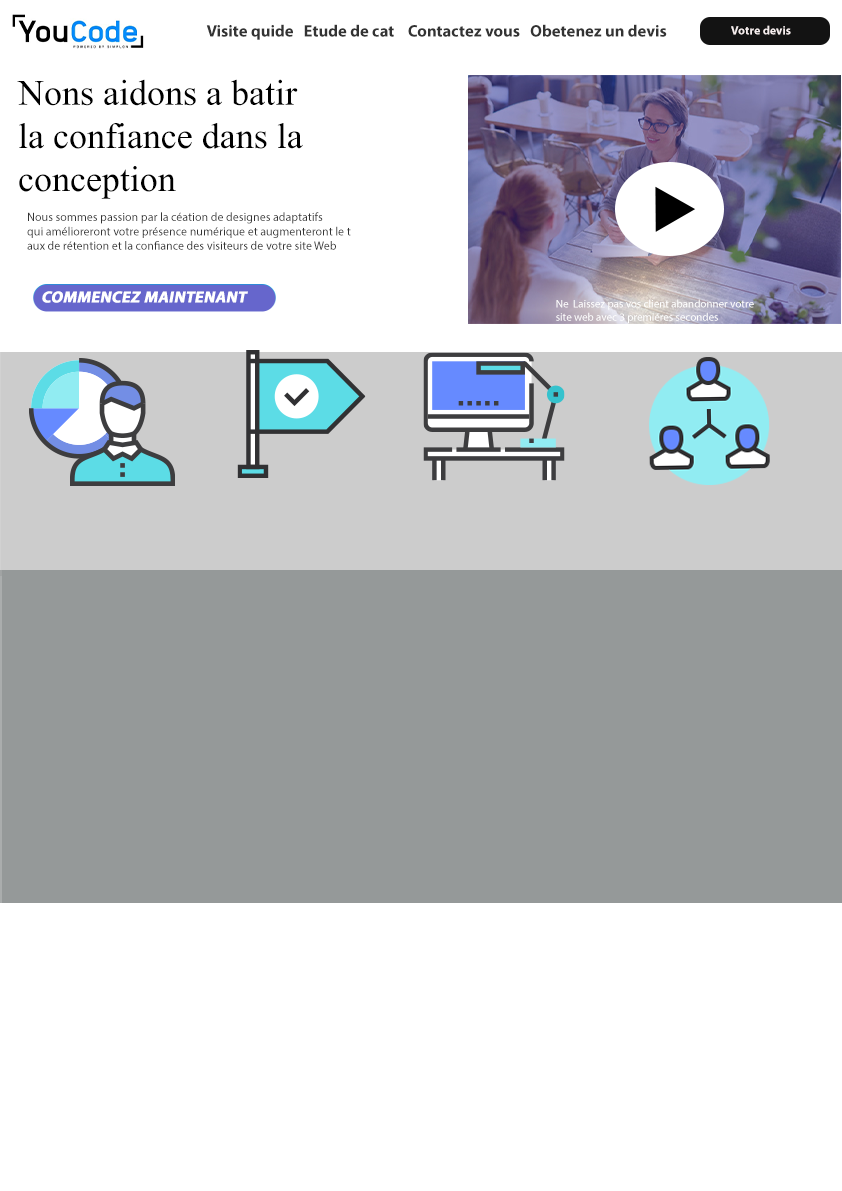
<style>
.page{position:relative;width:842px;height:1191px;background:#ffffff}
.page>*{position:absolute;margin:0}
.t1{font:16.6px "MyriadPro-Bold";color:#333333}
.t2{font:12px "MyriadPro-Bold";color:#f6eeee}
.t3{font:36px "MongolianBaiti";color:#000000}
.t4{font:12px "MyriadPro-Regular";color:#333333}
.t5{font:16px "MyriadPro-Bold";color:#ffffff;text-transform:uppercase;font-weight:bold;font-style:italic}
.t6{font:11px "MyriadPro-Regular";color:#ffffff}
</style>
<div class="page">
<p class="t1" style="left:206px;top:24px;width:461px;height:16px">Visite quide   Etude de cat    Contactez vous   Obetenez un devis</p>
<p class="t2" style="left:731px;top:25px;width:60px;height:10px">Votre devis</p>
<p class="t3" style="left:17px;top:79px;width:286px;height:120px">Nons aidons a batir <br>la confiance dans la<br>conception</p>
<p class="t4" style="left:27px;top:212px;width:324px;height:38px">Nous sommes passion par la céation de designes adaptatifs <br>qui amélioreront votre présence numérique et augmenteront le t<br>aux de rétention et la confiance des visiteurs de votre site Web</p>
<p class="t5" style="left:42px;top:291px;width:206px;height:12px">Commencez Maintenant</p>
<p class="t6" style="left:556px;top:299px;width:198px;height:24px">Ne  Laissez pas vos client abandonner votre<br>site web avec 3 premiéres secondes</p>
</div>
